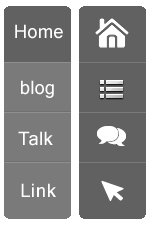
<style>
.page{position:relative;width:150px;height:225px;background:#616161}
.page>*{position:absolute;margin:0}
.t1{font:18px "Mangal";color:#ffffff}
.t2{font:18px "Mangal";letter-spacing:-0.06em;color:#ffffff}
.t3{font:18px "Mangal";letter-spacing:0.02em;color:#ffffff}
.t4{font:18px "Mangal";letter-spacing:0.04em;color:#ffffff}
</style>
<div class="page">
<p class="t1" style="left:15px;top:24px;width:48px;height:15px">Home</p>
<p class="t1" style="left:21px;top:80px;width:33px;height:18px">blog</p>
<p class="t2" style="left:18px;top:131px;width:35px;height:15px">T<span class="t1">a</span><span class="t3">l</span><span class="t1">k</span></p>
<p class="t4" style="left:21px;top:183px;width:35px;height:14px"><span class="t1">L</span>in<span class="t1">k</span></p>
</div>
